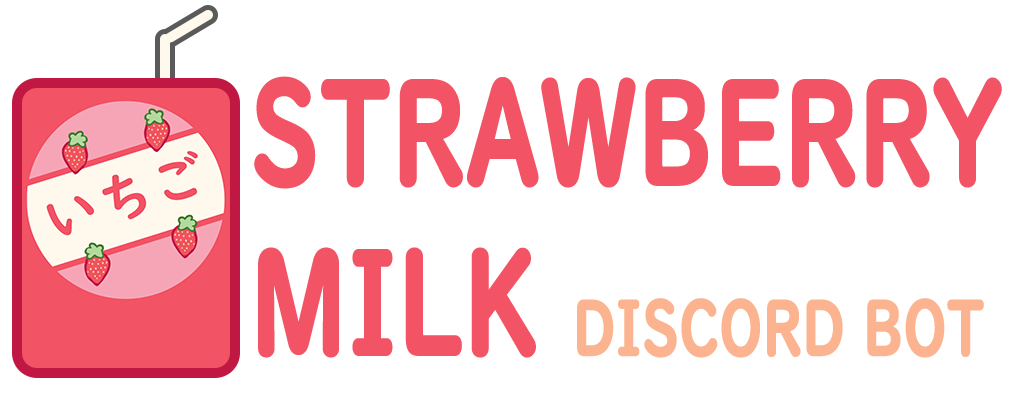
<style>
.page{position:relative;width:1014px;height:394px;background:#ffffff}
.page>*{position:absolute;margin:0}
.t1{font:141.7px "UDDigiKyokashoNP-B";color:#f25365;text-transform:uppercase;font-weight:bold;scale:0.7 1}
.t2{font:75px "UDDigiKyokashoNP-B";color:#fbb48f;text-transform:uppercase;font-weight:bold;scale:0.7 1}
</style>
<div class="page">
<p class="t1" style="left:254px;top:76px;width:748px;height:282px">Strawberry<br>Milk <span class="t2">discord bot</span></p>
</div>
